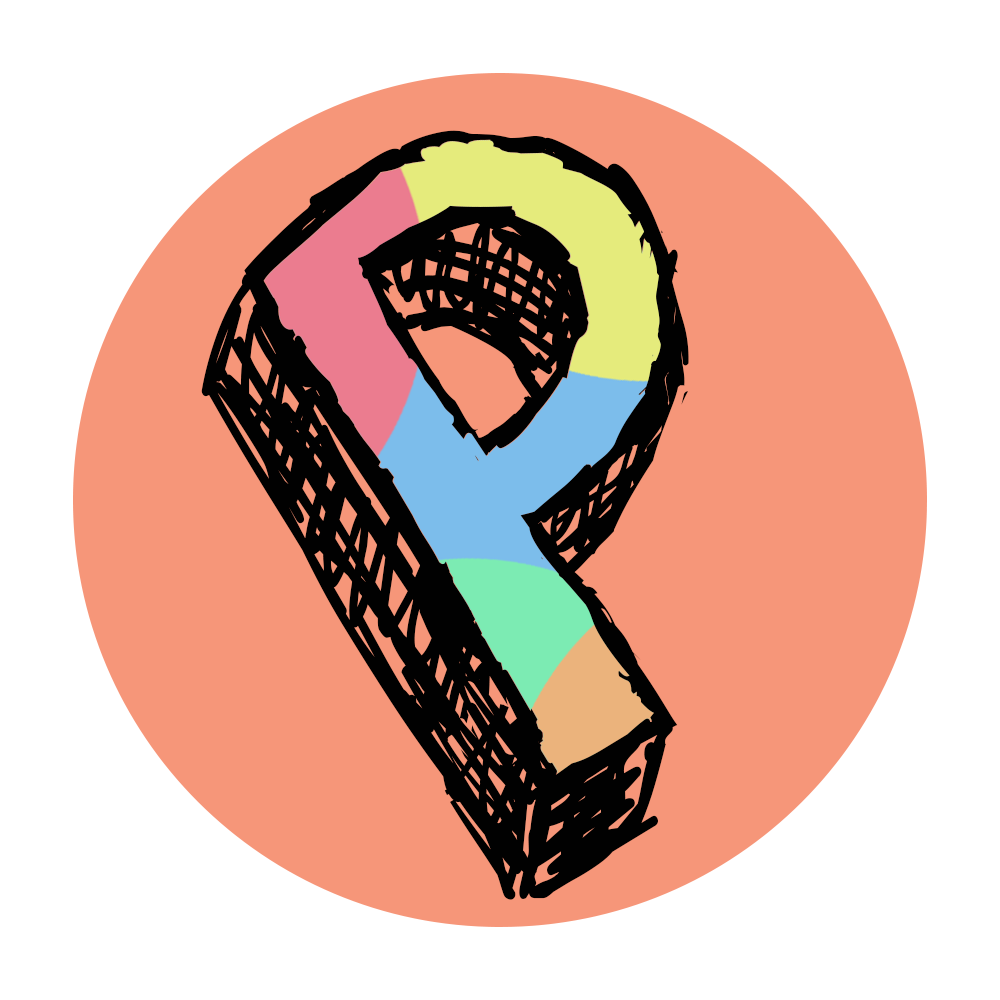
<style>
.page{position:relative;width:1000px;height:1000px;background:#ffffff}
.page>*{position:absolute;margin:0}
.t1{font:1000px "orangejuice";color:#010101}
</style>
<div class="page">
<p class="t1" style="left:201px;top:130px;width:488px;height:770px;rotate:-31deg">P</p>
</div>
